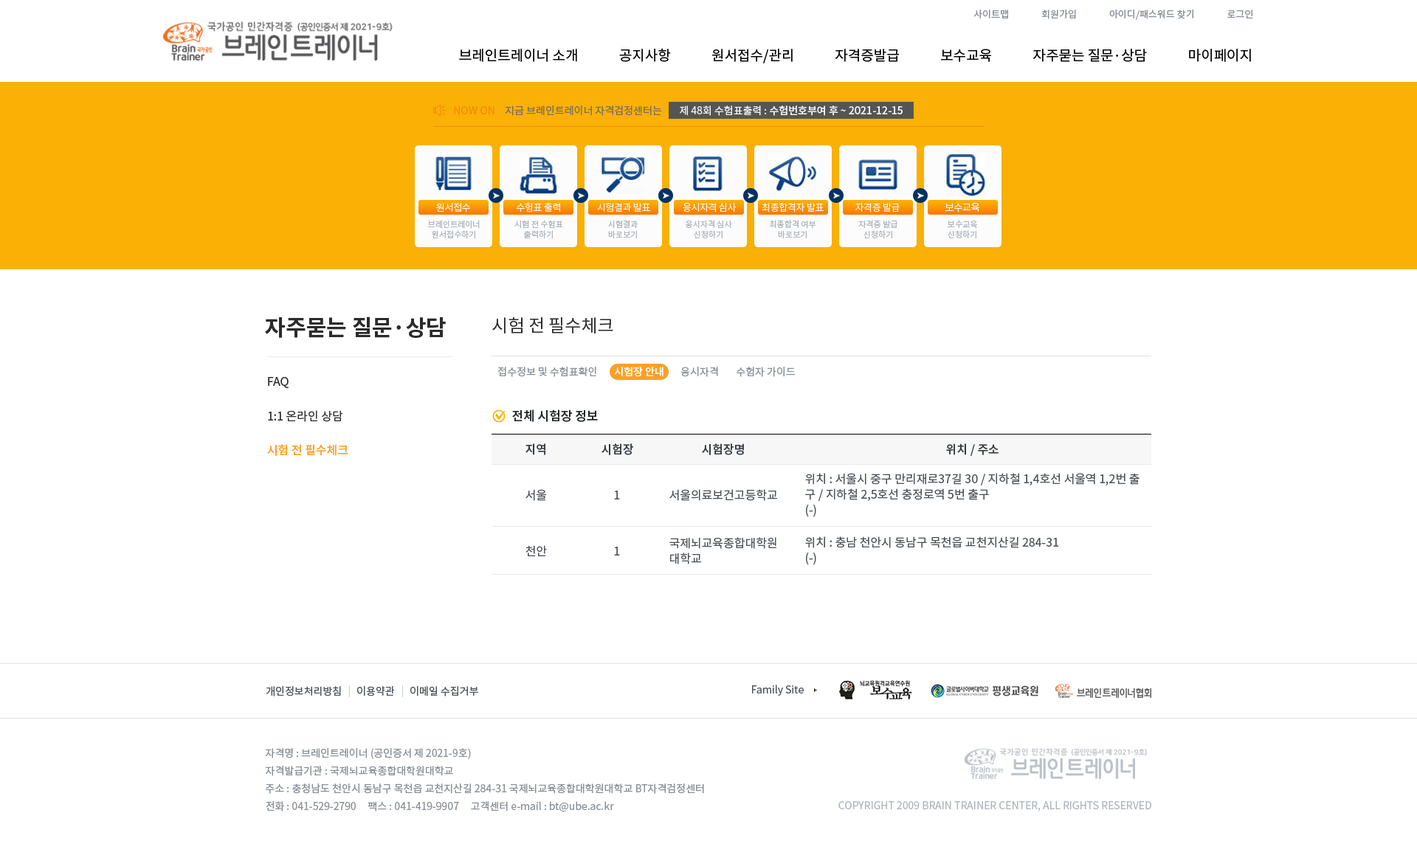
<style>
.page{position:relative;width:1417px;height:841px;background:#ffffff}
.page>*{position:absolute;margin:0}
.t1{font:9.6px "NotoSansCJKkr-Regular";letter-spacing:0.001em;color:#868e96}
.t2{font:14px "NotoSansCJKkr-Regular";color:#000000}
.t3{font:10.3px "NotoSansCJKkr-Regular";color:#f08c00}
.t4{font:10.3px "NotoSansCJKkr-Regular";color:#7c6d5d}
.t5{font:10.3px "NotoSansCJKkr-Medium";color:#f8f8f8}
.t6{font:10.3px "NotoSansCJKkr-Regular";color:#f8f8f8}
.t7{font:9.6px "NotoSansCJKkr-Light";letter-spacing:-0.025em;color:#fcfcfc}
.t8{font:8.1px/10.3px "NotoSansCJKkr-Regular";color:#adb5bd}
.t9{font:22.1px "NotoSansCJKkr-Bold";color:#2b2b2b}
.t10{font:17.7px "NotoSansCJKkr-Regular";color:#2b2b2b}
.t11{font:11.8px "NotoSansCJKkr-Regular";color:#2b2b2b}
.t12{font:10.3px "NotoSansCJKkr-Regular";color:#868e96}
.t13{font:10.3px "NotoSansCJKkr-Medium";color:#ffffff}
.t14{font:12.5px "NotoSansCJKkr-Medium";color:#212529}
.t15{font:11.8px "NotoSansCJKkr-Medium";color:#fd9f27}
.t16{font:11.8px "NotoSansCJKkr-Medium";color:#343a40}
.t17{font:11.8px/15.5px "NotoSansCJKkr-Regular";color:#495057}
.t18{font:11.8px "NotoSansCJKkr-Regular";color:#495057}
.t19{font:10.3px "NotoSansCJKkr-Regular";color:#495057}
.t20{font:10.3px "NotoSansCJKkr-Regular";color:#ced4da}
.t21{font:10.3px/17.7px "NotoSansCJKkr-Regular";color:#868e96}
.t22{font:10.3px "NotoSansCJKkr-Regular";color:#adb5bd}
</style>
<div class="page">
<p class="t1" style="left:974px;top:9px;width:279px;height:11px">사이트맵               회원가입               아이디/패스워드 찾기               로그인</p>
<p class="t2" style="left:459px;top:48px;width:792px;height:15px">브레인트레이너 소개             공지사항             원서접수/관리             자격증발급             보수교육             자주묻는 질문·상담             마이페이지</p>
<p class="t3" style="left:454px;top:106px;width:41px;height:8px">NOW ON</p>
<p class="t4" style="left:505px;top:106px;width:157px;height:10px">지금 브레인트레이너 자격검정센터는</p>
<p class="t5" style="left:680px;top:106px;width:223px;height:10px"><span class="t6">제 48회 수험표출력 : </span>수험번호부여 후 ~ 2021-12-15</p>
<p class="t7" style="left:436px;top:203px;width:35px;height:10px">원서접수</p>
<p class="t7" style="left:517px;top:202px;width:43px;height:11px">수험표 출력</p>
<p class="t7" style="left:597px;top:202px;width:53px;height:10px">시험결과 발표</p>
<p class="t7" style="left:683px;top:202px;width:54px;height:11px">응시자격 심사</p>
<p class="t7" style="left:762px;top:202px;width:62px;height:11px">최종합격자 발표</p>
<p class="t7" style="left:855px;top:202px;width:45px;height:11px">자격증 발급</p>
<p class="t7" style="left:945px;top:203px;width:34px;height:10px">보수교육</p>
<p class="t8" style="left:428px;top:220px;width:52px;height:19px;text-align:center">브레인트레이너<br>원서접수하기</p>
<p class="t8" style="left:514px;top:220px;width:49px;height:19px;text-align:center">시험 전 수험표<br>출력하기</p>
<p class="t8" style="left:608px;top:220px;width:30px;height:19px;text-align:center">시험결과<br>바로보기</p>
<p class="t8" style="left:686px;top:220px;width:46px;height:19px;text-align:center">응시자격 심사<br>신청하기</p>
<p class="t8" style="left:770px;top:220px;width:46px;height:19px;text-align:center">최종합격 여부<br>바로보기</p>
<p class="t8" style="left:858px;top:220px;width:40px;height:19px;text-align:center">자격증 발급<br>신청하기</p>
<p class="t8" style="left:948px;top:220px;width:30px;height:19px;text-align:center">보수교육<br>신청하기</p>
<p class="t9" style="left:265px;top:317px;width:181px;height:21px">자주묻는 질문·상담</p>
<p class="t10" style="left:492px;top:317px;width:121px;height:17px">시험 전 필수체크</p>
<p class="t11" style="left:268px;top:377px;width:21px;height:11px">FAQ</p>
<p class="t12" style="left:497px;top:367px;width:99px;height:10px">접수정보 및 수험표확인</p>
<p class="t13" style="left:614px;top:367px;width:50px;height:10px">시험장 안내</p>
<p class="t12" style="left:681px;top:367px;width:37px;height:10px">응시자격</p>
<p class="t12" style="left:736px;top:367px;width:59px;height:10px">수험자 가이드</p>
<p class="t11" style="left:268px;top:410px;width:75px;height:12px">1:1 온라인 상담</p>
<p class="t14" style="left:512px;top:410px;width:86px;height:12px">전체 시험장 정보</p>
<p class="t15" style="left:267px;top:444px;width:81px;height:12px">시험 전 필수체크</p>
<p class="t16" style="left:526px;top:444px;width:19px;height:11px">지역</p>
<p class="t16" style="left:602px;top:444px;width:31px;height:11px">시험장</p>
<p class="t16" style="left:702px;top:444px;width:42px;height:11px">시험장명</p>
<p class="t16" style="left:946px;top:444px;width:53px;height:12px">위치 / 주소</p>
<p class="t17" style="left:805px;top:473px;width:335px;height:44px">위치 : 서울시 중구 만리재로37길 30 / 지하철 1,4호선 서울역 1,2번 출<br>구 / 지하철 2,5호선 충정로역 5번 출구<br>(-)</p>
<p class="t18" style="left:526px;top:489px;width:21px;height:12px">서울</p>
<p class="t18" style="left:614px;top:491px;width:6px;height:9px">1</p>
<p class="t18" style="left:669px;top:489px;width:108px;height:12px">서울의료보건고등학교</p>
<p class="t18" style="left:526px;top:545px;width:21px;height:12px">천안</p>
<p class="t17" style="left:669px;top:537px;width:107px;height:28px">국제뇌교육종합대학원<br>대학교</p>
<p class="t17" style="left:805px;top:537px;width:254px;height:28px">위치 : 충남 천안시 동남구 목천읍 교천지산길 284-31<br>(-)</p>
<p class="t18" style="left:614px;top:547px;width:6px;height:9px">1</p>
<p class="t19" style="left:266px;top:686px;width:75px;height:11px">개인정보처리방침</p>
<p class="t20" style="left:348px;top:686px;width:2px;height:12px">|</p>
<p class="t19" style="left:357px;top:686px;width:38px;height:11px">이용약관</p>
<p class="t20" style="left:402px;top:686px;width:1px;height:12px">|</p>
<p class="t19" style="left:410px;top:686px;width:68px;height:11px">이메일 수집거부</p>
<p class="t19" style="left:752px;top:685px;width:52px;height:11px">Family Site</p>
<p class="t21" style="left:265px;top:748px;width:439px;height:65px">자격명 : 브레인트레이너 (공인증서 제 2021-9호)<br>자격발급기관 : 국제뇌교육종합대학원대학교<br>주소 : 충청남도 천안시 동남구 목천읍 교천지산길 284-31 국제뇌교육종합대학원대학교 BT자격검정센터<br>전화 : 041-529-2790     팩스 : 041-419-9907     고객센터 e-mail : bt@ube.ac.kr</p>
<p class="t22" style="left:838px;top:802px;width:313px;height:10px">COPYRIGHT 2009 BRAIN TRAINER CENTER, ALL RIGHTS RESERVED</p>
</div>
